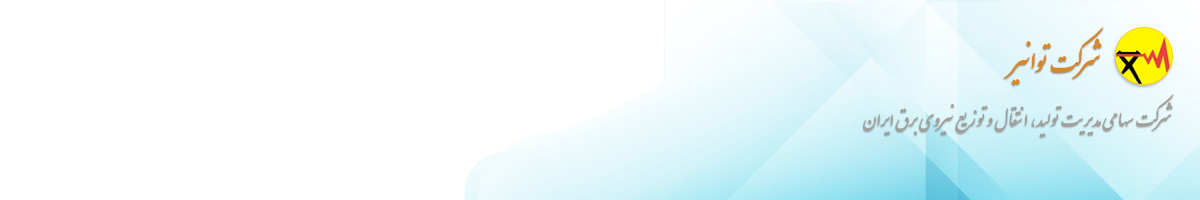
<style>
.page{position:relative;width:1200px;height:200px;background:#ffffff}
.page>*{position:absolute;margin:0}
.t1{font:28px "IranNastaliq";color:#d98624;font-weight:bold}
.t2{font:20px "IranNastaliq";color:#a19f9c;font-weight:bold}
</style>
<div class="page">
<p class="t1" style="left:1003px;top:27px;width:100px;height:59px;text-align:right">شرکت توانیر</p>
<p class="t2" style="left:863px;top:94px;width:311px;height:44px;text-align:right">شرکت سهامی مدیریت تولید، انتقال و توزیع نیروی برق ایران</p>
</div>
